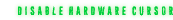
<style>
.page{position:relative;width:173px;height:20px;background:#ffffff}
.page>*{position:absolute;margin:0}
.t1{font:12px "Sunzoomspark";color:#00d03b}
</style>
<div class="page">
<p class="t1" style="left:18px;top:6px;width:155px;height:10px">D I S A B L E  H A R D W A R E  C U R S O R</p>
</div>
